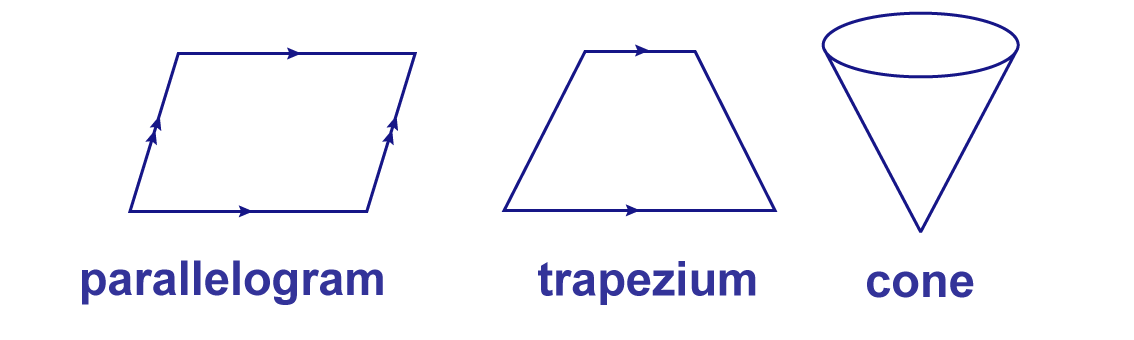
<style>
.page{position:relative;width:1134px;height:340px;background:#ffffff}
.page>*{position:absolute;margin:0}
.t1{font:48px "Arial-BoldMT";color:#333399}
</style>
<div class="page">
<p class="t1" style="left:82px;top:260px;width:301px;height:45px">parallelogram</p>
<p class="t1" style="left:538px;top:261px;width:218px;height:44px">trapezium</p>
<p class="t1" style="left:867px;top:271px;width:107px;height:27px">cone</p>
</div>
